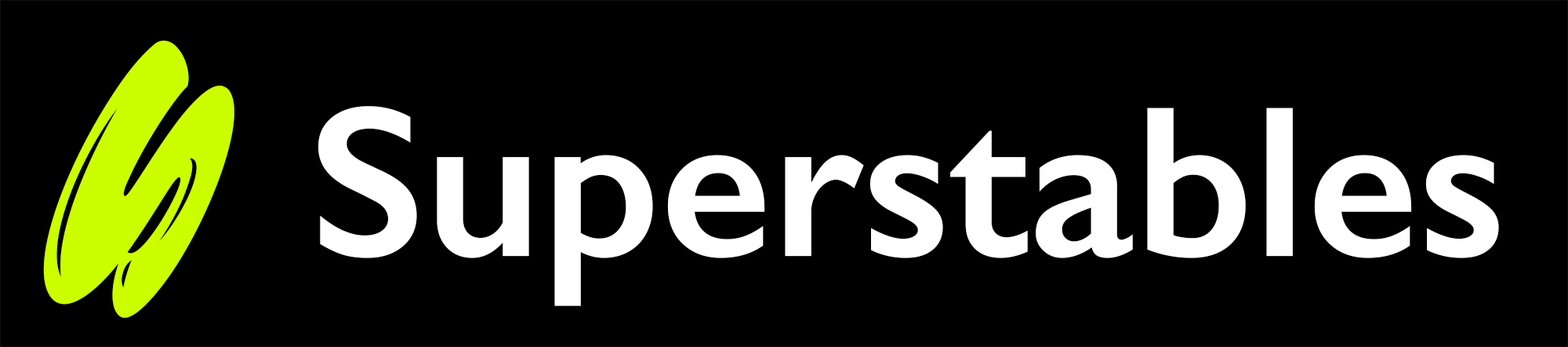
<style>
.page{position:relative;width:1568px;height:347px;background:#000000}
.page>*{position:absolute;margin:0}
.t1{font:221.6px "Oups";color:#cbff00;scale:2.17 1}
.t2{font:216.3px "GillSans-SemiBold";color:#ffffff}
</style>
<div class="page">
<p class="t1" style="left:43px;top:40px;width:191px;height:278px;rotate:-56deg">S</p>
<p class="t2" style="left:318px;top:106px;width:1181px;height:200px">Superstables</p>
</div>
